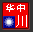
<style>
.page{position:relative;width:33px;height:32px;background:#f20000}
.page>*{position:absolute;margin:0}
.t1{font:10.4px "SimSun";color:#ffffff}
.t2{font:11.7px "SimSun";color:#ffffff}
</style>
<div class="page">
<p class="t1" style="left:6px;top:4px;width:19px;height:8px">华中</p>
<p class="t2" style="left:16px;top:15px;width:11px;height:12px">川</p>
</div>
